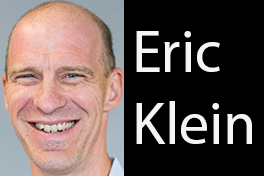
<style>
.page{position:relative;width:264px;height:176px;background:#000000}
.page>*{position:absolute;margin:0}
.t1{font:60px "MyriadPro-Regular";color:#f7f4f4}
</style>
<div class="page">
<p class="t1" style="left:136px;top:31px;width:116px;height:113px">Eric<br>Klein</p>
</div>
